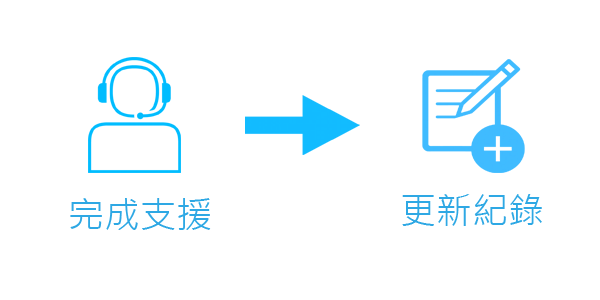
<style>
.page{position:relative;width:600px;height:300px;background:#ffffff}
.page>*{position:absolute;margin:0}
.t1{font:36px "MicrosoftJhengHeiUIRegular";color:#2ea8e4}
</style>
<div class="page">
<p class="t1" style="left:70px;top:198px;width:141px;height:32px">完成支援</p>
<p class="t1" style="left:402px;top:194px;width:140px;height:32px">更新紀錄</p>
</div>
